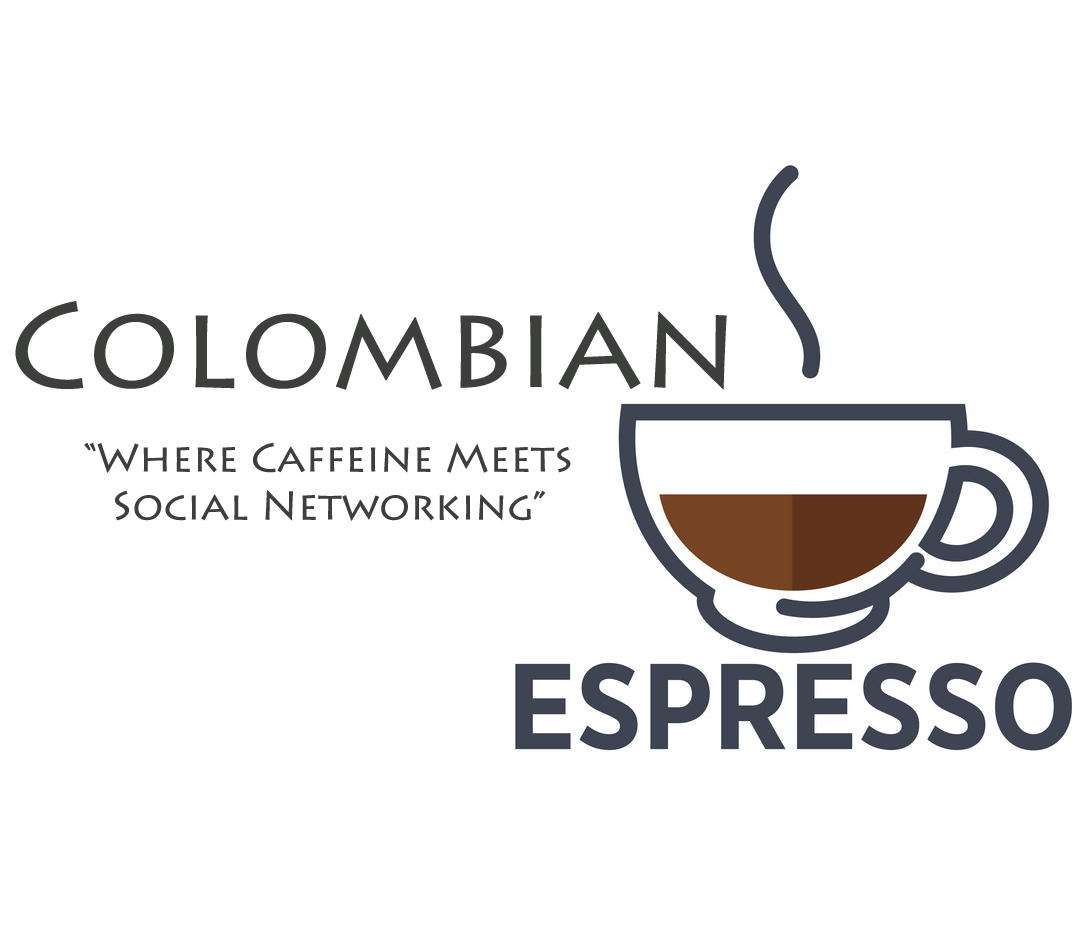
<style>
.page{position:relative;width:1080px;height:936px;background:#ffffff}
.page>*{position:absolute;margin:0}
.t1{font:120px "LithosPro-Regular";color:#3d3f3d}
.t2{font:40px "LithosPro-Regular";color:#3d3f3d}
</style>
<div class="page">
<p class="t1" style="left:15px;top:301px;width:712px;height:89px">Colombian</p>
<p class="t2" style="left:84px;top:442px;width:487px;height:79px;text-align:center">“Where Caffeine Meets<br>Social Networking”</p>
</div>
